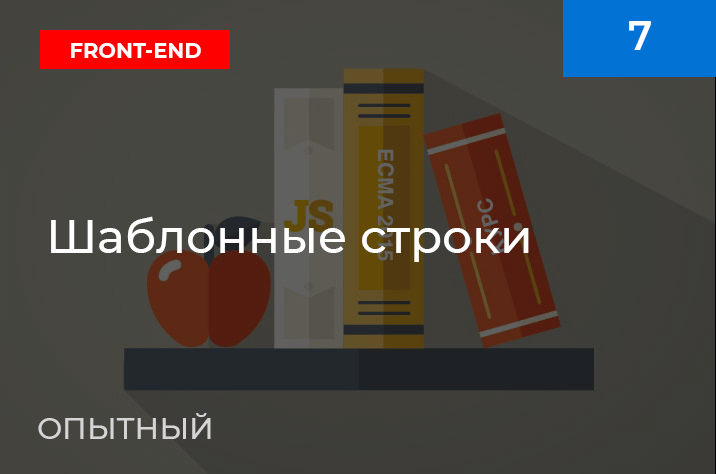
<style>
.page{position:relative;width:716px;height:474px}
.page>*{position:absolute;margin:0}
.t1{font:40px "Montserrat-SemiBold";color:#ffffff}
.t2{font:22px "Montserrat-Bold";color:#ffffff;scale:0.95 1}
.t3{font:47px "Montserrat-Medium";color:#ffffff}
.t4{font:30px "Montserrat-Medium";color:#d5d5d5}
</style>
<div class="page">
<p class="t1" style="left:629px;top:21px;width:22px;height:29px">7</p>
<p class="t2" style="left:71px;top:43px;width:130px;height:15px">FRONT-END</p>
<p class="t3" style="left:51px;top:216px;width:478px;height:46px">Шаблонные строки</p>
<p class="t4" style="left:38px;top:413px;width:173px;height:26px">ОПЫТНЫЙ</p>
</div>
